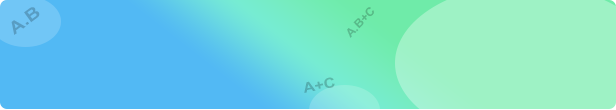
<style>
.page{position:relative;width:616px;height:110px;background:#9ef2c5}
.page>*{position:absolute;margin:0}
.t1{font:17px "Arial-BoldMT";color:#589dc3;scale:1.16 1}
.t2{font:11.6px "Arial-BoldMT";color:#57bb88;scale:1.03 1}
.t3{font:13.9px "Arial-BoldMT";color:#57b2ae;scale:1.16 1}
</style>
<div class="page">
<p class="t1" style="left:11px;top:7px;width:29px;height:28px;rotate:-36deg">A.B</p>
<p class="t2" style="left:347px;top:7px;width:27px;height:31px;rotate:-46deg">A.B+C</p>
<p class="t3" style="left:304px;top:77px;width:31px;height:16px;rotate:-12deg">A+C</p>
</div>
